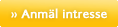
<style>
.page{position:relative;width:118px;height:27px}
.page>*{position:absolute;margin:0}
.t1{font:12px "ICASansSerif-Bold";color:#ffffff;font-weight:bold}
</style>
<div class="page">
<p class="t1" style="left:11px;top:8px;width:96px;height:11px">›› Anmäl intresse</p>
</div>
